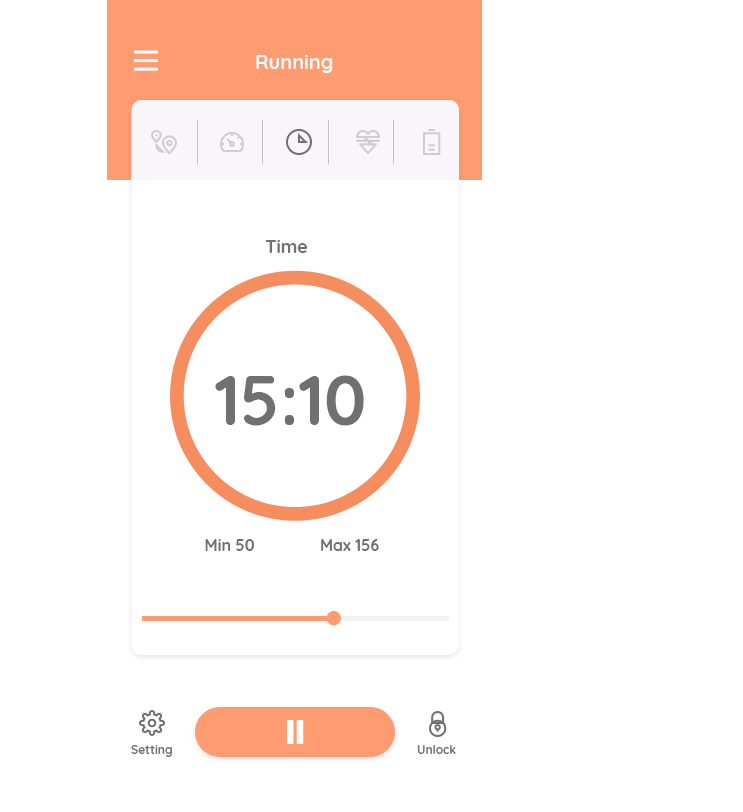
<style>
.page{position:relative;width:743px;height:812px;background:#ffffff}
.page>*{position:absolute;margin:0}
.t1{font:20px "Quicksand-Bold";color:#ffffff}
.t2{font:18px "Quicksand-Bold";color:#707070}
.t3{font:69px "Quicksand-Bold";color:#707070}
.t4{font:16px "Quicksand-Bold";color:#707070}
.t5{font:12px "Quicksand-Bold";color:#707070}
</style>
<div class="page">
<p class="t1" style="left:256px;top:55px;width:77px;height:18px">Running</p>
<p class="t2" style="left:265px;top:240px;width:43px;height:13px">Time</p>
<p class="t3" style="left:215px;top:375px;width:149px;height:51px">15:10</p>
<p class="t4" style="left:205px;top:539px;width:49px;height:12px">Min 50</p>
<p class="t4" style="left:321px;top:539px;width:58px;height:12px">Max 156</p>
<p class="t5" style="left:131px;top:745px;width:41px;height:12px">Setting</p>
<p class="t5" style="left:417px;top:745px;width:39px;height:9px">Unlock</p>
</div>
